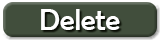
<style>
.page{position:relative;width:160px;height:40px;background:#414e3c}
.page>*{position:absolute;margin:0}
.t1{font:30px "BerlinSansFB-Reg";color:#ffffff}
</style>
<div class="page">
<p class="t1" style="left:41px;top:9px;width:79px;height:21px">Delete</p>
</div>
